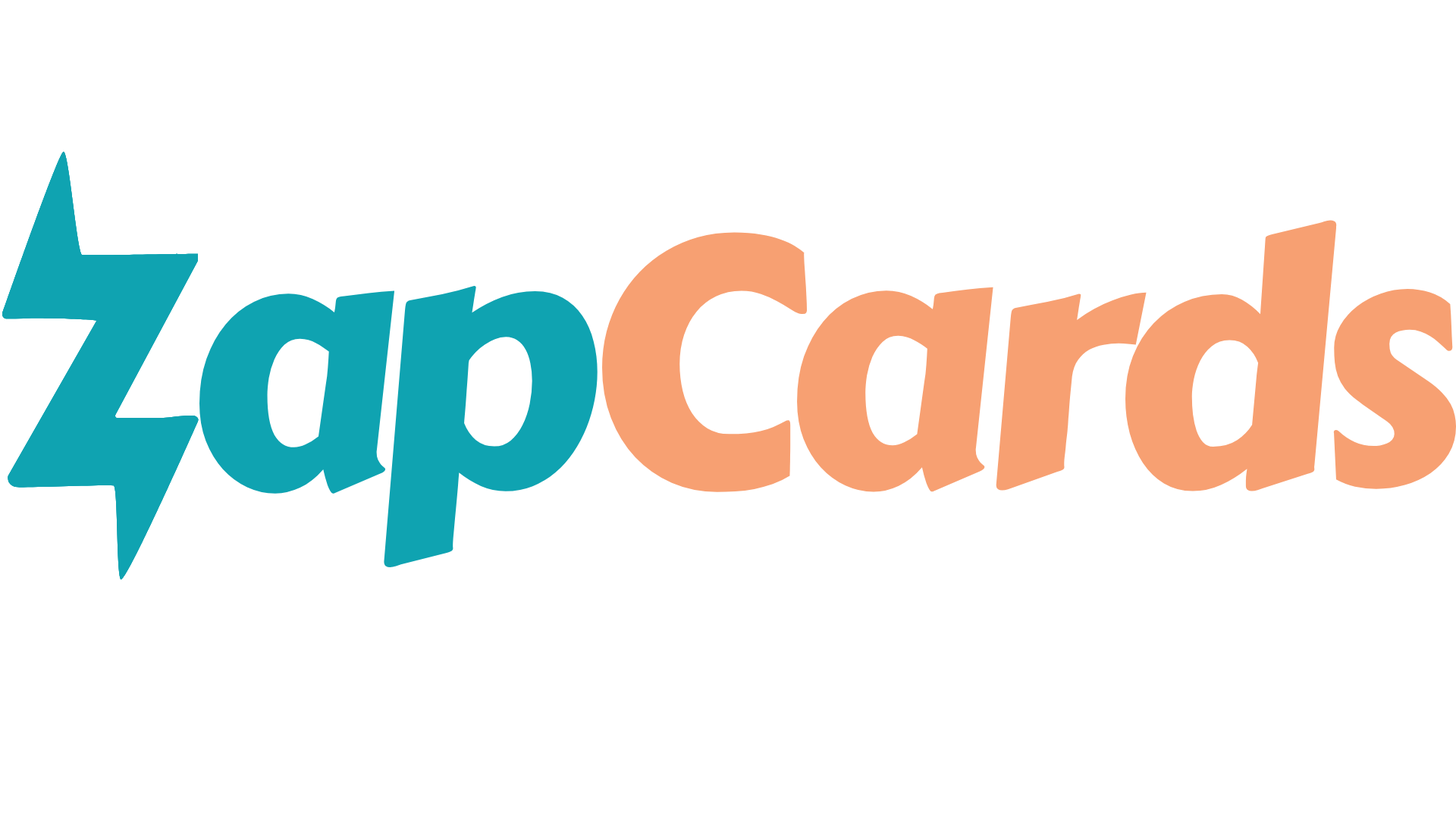
<style>
.page{position:relative;width:1456px;height:819px;background:#ffffff}
.page>*{position:absolute;margin:0}
.t1{font:345.1px "CarterOne";color:#f7a072}
.t2{font:349.7px "CarterOne";color:#f7a072}
.t3{font:350.2px "CarterOne";color:#0fa3b1}
.t4{font:350.6px "CarterOne";color:#0fa3b1}
.t5{font:352.9px "CarterOne";color:#f7a072}
.t6{font:344.5px "CarterOne";color:#f7a072}
.t7{font:350.6px "CarterOne";color:#f7a072}
</style>
<div class="page">
<p class="t1" style="left:1125px;top:220px;width:212px;height:271px">d</p>
<p class="t2" style="left:602px;top:232px;width:206px;height:260px">C</p>
<p class="t3" style="left:199px;top:290px;width:196px;height:204px">a</p>
<p class="t4" style="left:384px;top:286px;width:214px;height:281px">p</p>
<p class="t5" style="left:796px;top:287px;width:197px;height:205px">a</p>
<p class="t6" style="left:996px;top:292px;width:151px;height:199px">r</p>
<p class="t7" style="left:1333px;top:289px;width:124px;height:200px">s</p>
</div>
